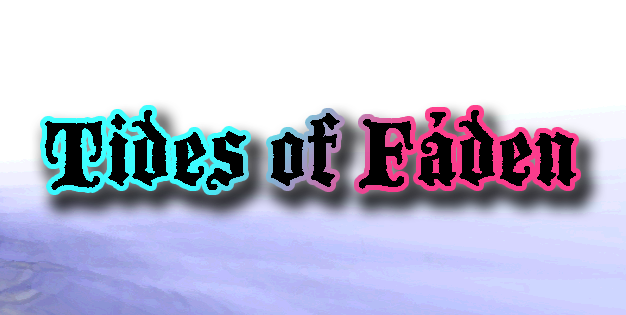
<style>
.page{position:relative;width:626px;height:315px;background:#ffffff}
.page>*{position:absolute;margin:0}
.t1{font:100px "BlackmoorLetPlain";color:#000000}
</style>
<div class="page">
<p class="t1" style="left:45px;top:110px;width:531px;height:80px">Tides of Fáden</p>
</div>
